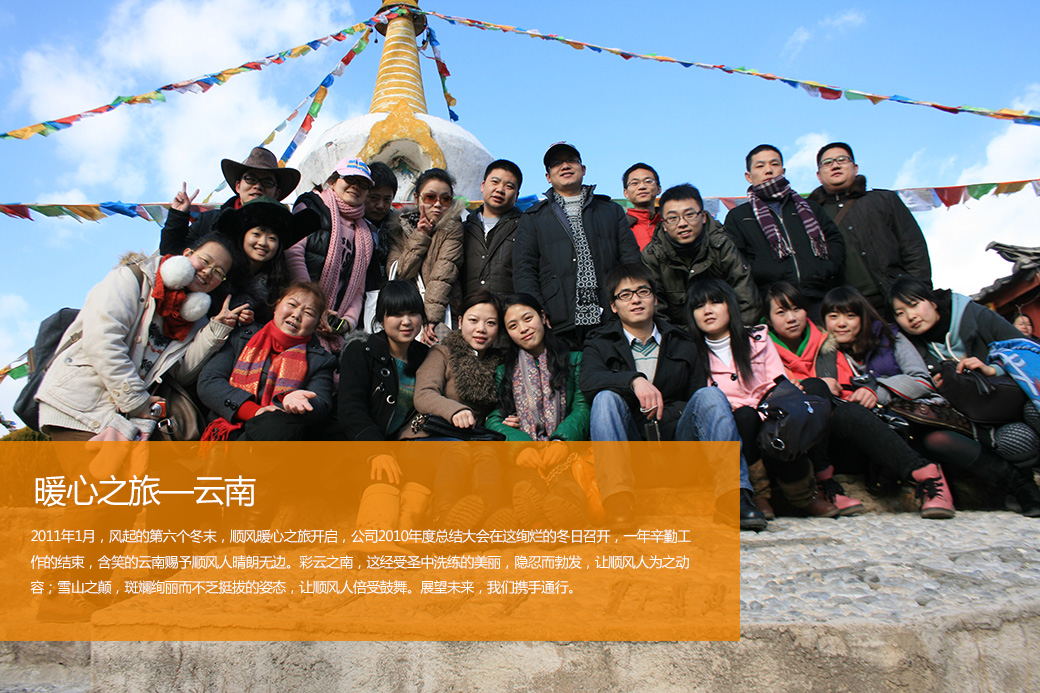
<style>
.page{position:relative;width:1040px;height:693px}
.page>*{position:absolute;margin:0}
.t1{font:32.5px "MicrosoftYaHei";letter-spacing:-0.04em;color:#ffffff}
.t2{font:14px/25.6px "MicrosoftYaHei";letter-spacing:-0.04em;color:#ffffff}
</style>
<div class="page">
<p class="t1" style="left:35px;top:474px;width:221px;height:33px">暖心之旅—云南</p>
<p class="t2" style="left:30px;top:529px;width:661px;height:65px">2011年1月，风起的第六个冬末，顺风暖心之旅开启，公司2010年度总结大会在这绚烂的冬日召开，一年辛勤工作的结束，含笑的云南赐予顺风人晴朗无边。彩云之南，这经受圣中洗练的美丽，隐忍而勃发，让顺风人为之动容；雪山之颠，斑斓绚丽而不乏挺拔的姿态，让顺风人倍受鼓舞。展望未来，我们携手通行。</p>
</div>
